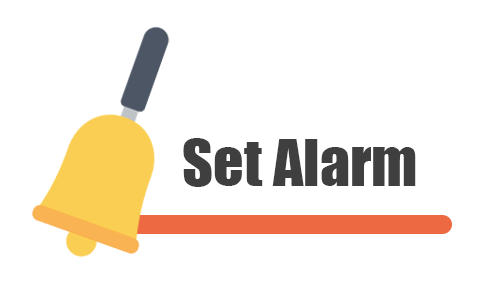
<style>
.page{position:relative;width:500px;height:300px;background:#ffffff}
.page>*{position:absolute;margin:0}
.t1{font:60px "Impact";color:#403f3f}
</style>
<div class="page">
<p class="t1" style="left:183px;top:138px;width:233px;height:49px">Set Alarm</p>
</div>
